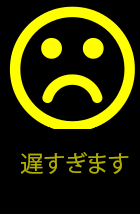
<style>
.page{position:relative;width:140px;height:214px;background:#000000}
.page>*{position:absolute;margin:0}
.t1{font:22.5px "KozGoPr6N-Regular";color:#b0af00}
</style>
<div class="page">
<p class="t1" style="left:20px;top:152px;width:109px;height:22px">遅すぎます</p>
</div>
